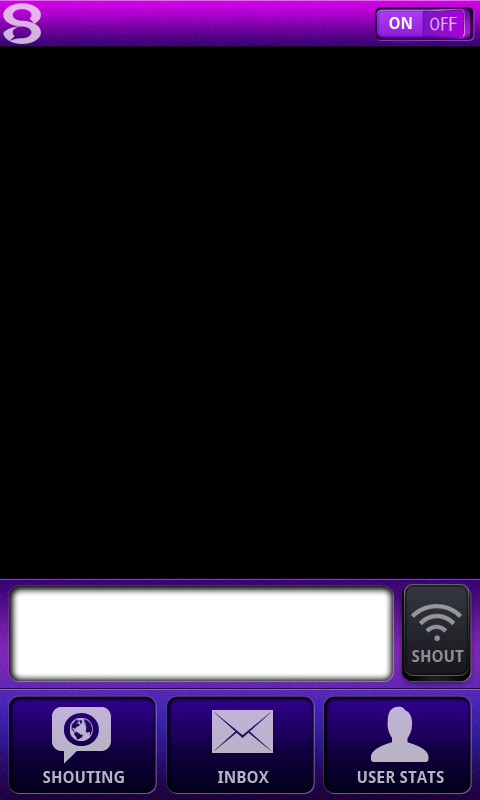
<style>
.page{position:relative;width:480px;height:800px;background:#000000}
.page>*{position:absolute;margin:0}
.t1{font:16px "DroidSans-Bold";color:#ffffff}
.t2{font:16px "DroidSans-Bold";color:#8e8f92}
.t3{font:16px "DroidSans-Bold";color:#b5b3bf}
</style>
<div class="page">
<p class="t1" style="left:389px;top:17px;width:23px;height:12px">ON</p>
<p class="t2" style="left:412px;top:650px;width:52px;height:12px">SHOUT</p>
<p class="t3" style="left:43px;top:771px;width:81px;height:12px">SHOUTING</p>
<p class="t3" style="left:218px;top:771px;width:51px;height:12px">INBOX</p>
<p class="t3" style="left:357px;top:771px;width:87px;height:12px">USER STATS</p>
</div>
